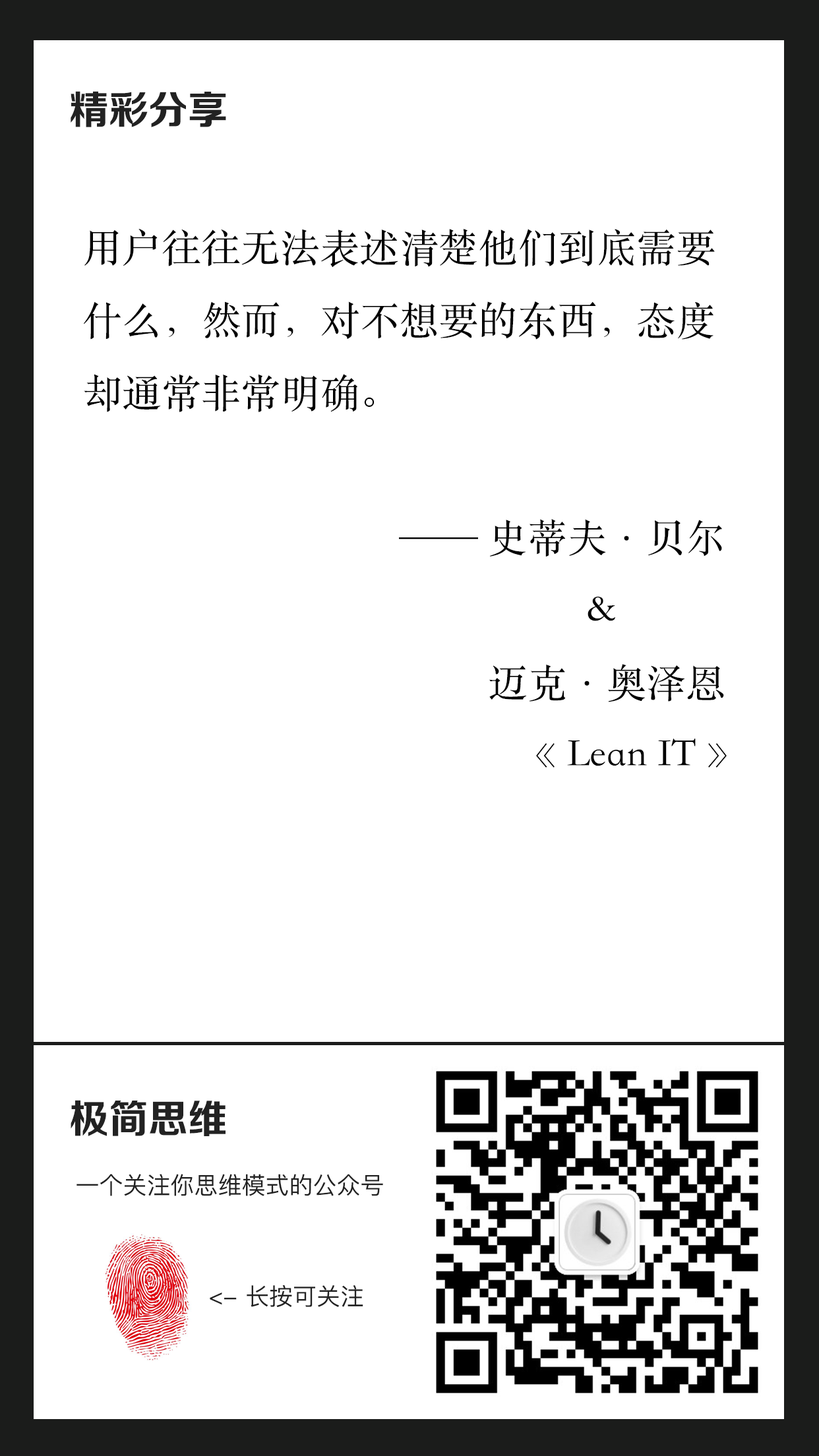
<style>
.page{position:relative;width:819px;height:1456px;background:#ffffff}
.page>*{position:absolute;margin:0}
.t1{font:39.6px "FZZCHJW--GB1-0";color:#222222}
.t2{font:39.6px/72.5px "STSongti-SC-Regular";color:#000000}
.t3{font:23.7px "PingFangSC-Regular";color:#222222}
</style>
<div class="page">
<p class="t1" style="left:71px;top:91px;width:155px;height:36px">精彩分享</p>
<p class="t2" style="left:84px;top:229px;width:643px;height:539px">用户往往无法表述清楚他们到底需要<br>什么，然而，对不想要的东西，态度<br>却通常非常明确。<br><br>                                —— 史蒂夫·贝尔<br>                                                   &amp;<br>                                         迈克·奥泽恩<br>                                            《 Lean IT 》</p>
<p class="t1" style="left:71px;top:1100px;width:155px;height:36px">极简思维</p>
<p class="t3" style="left:76px;top:1174px;width:307px;height:22px">一个关注你思维模式的公众号</p>
<p class="t3" style="left:210px;top:1285px;width:153px;height:23px">&lt;- 长按可关注</p>
</div>
